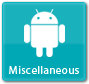
<style>
.page{position:relative;width:89px;height:84px;background:#00a8b5}
.page>*{position:absolute;margin:0}
.t1{font:11px "MyriadPro-Regular";letter-spacing:0.04em;color:#ffffff}
</style>
<div class="page">
<p class="t1" style="left:9px;top:66px;width:70px;height:8px">Miscellaneous</p>
<p class="t1" style="left:9px;top:66px;width:70px;height:8px">Miscellaneous</p>
</div>
